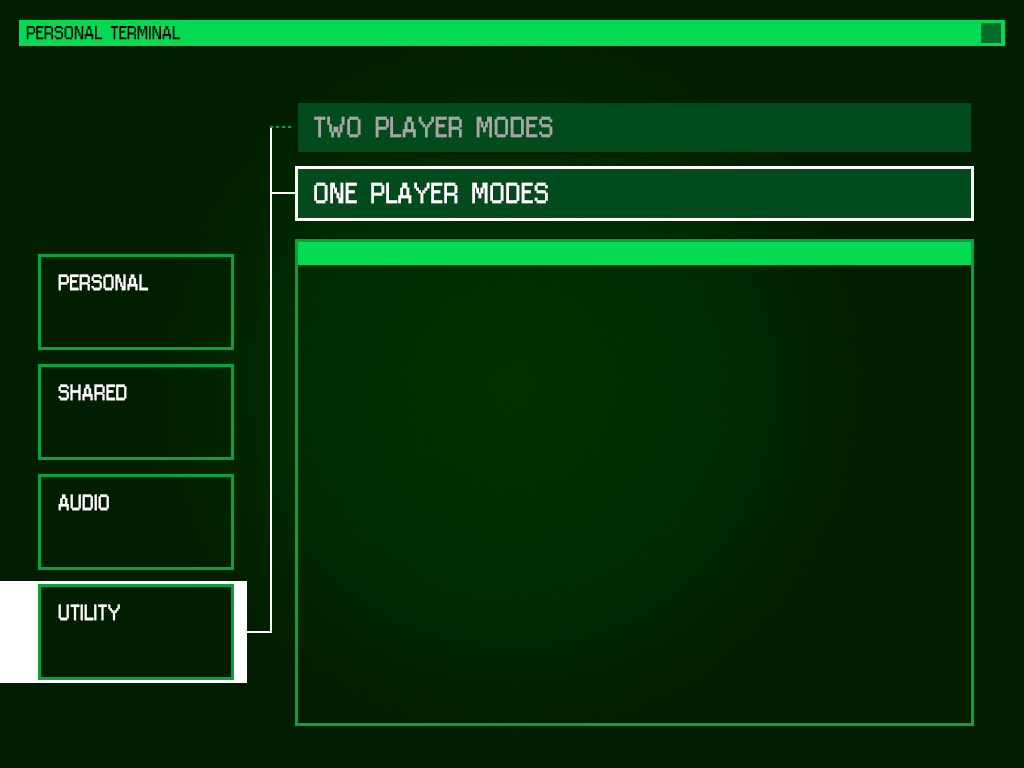
<style>
.page{position:relative;width:1024px;height:768px;background:#011e00}
.page>*{position:absolute;margin:0}
.t1{font:16px "Jixellation";color:#000000}
.t2{font:25px "Jixellation";color:#a6a6a6}
.t3{font:25px "Jixellation";color:#ffffff}
.t4{font:19px "Jixellation";color:#ffffff}
</style>
<div class="page">
<p class="t1" style="left:26px;top:25px;width:155px;height:15px">PERSONAL TERMINAL</p>
<p class="t2" style="left:314px;top:116px;width:239px;height:22px"><span class="t3"><br></span>TWO PLAYER MODES</p>
<p class="t3" style="left:314px;top:182px;width:234px;height:22px">ONE PLAYER MODES</p>
<p class="t4" style="left:58px;top:274px;width:91px;height:17px">PERSONAL</p>
<p class="t4" style="left:58px;top:384px;width:69px;height:17px">SHARED</p>
<p class="t4" style="left:58px;top:494px;width:51px;height:17px">AUDIO</p>
<p class="t4" style="left:58px;top:604px;width:62px;height:17px">UTILITY</p>
</div>
